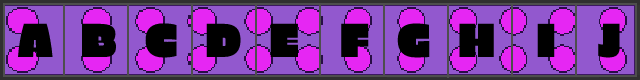
<style>
.page{position:relative;width:640px;height:80px;background:#9258ce}
.page>*{position:absolute;margin:0}
.t1{font:48px "EricaOne-Regular";color:#000000}
</style>
<div class="page">
<p class="t1" style="left:17px;top:23px;width:603px;height:35px">A  B  C  D  E   F  G  H   I   J</p>
</div>
